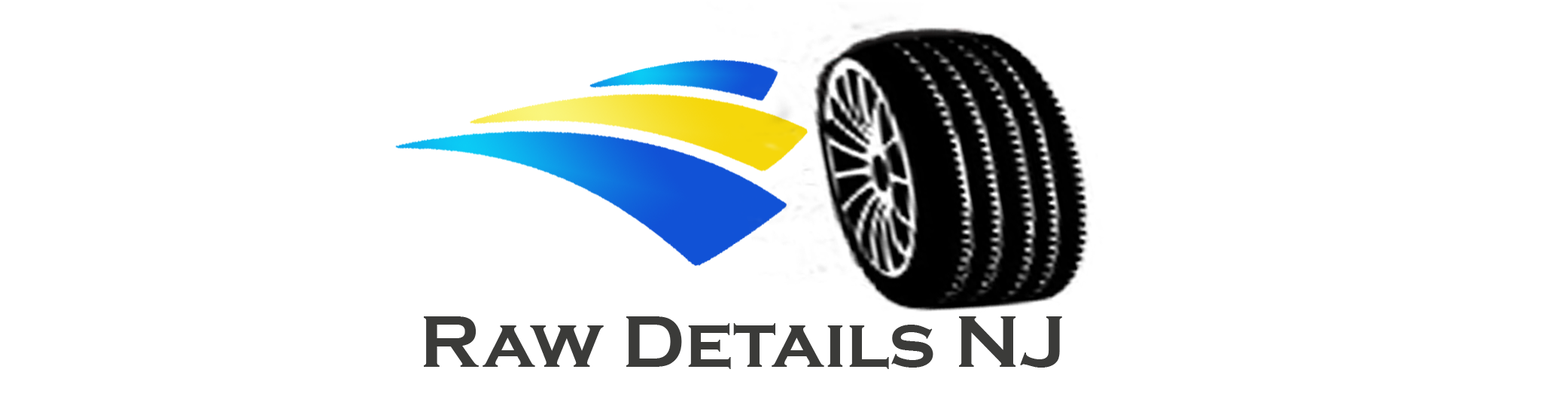
<style>
.page{position:relative;width:1568px;height:409px;background:#ffffff}
.page>*{position:absolute;margin:0}
.t1{font:75.3px "CopperplateGothic-Bold";color:#3b3b39}
</style>
<div class="page">
<p class="t1" style="left:424px;top:316px;width:638px;height:53px">Raw Details NJ</p>
</div>
